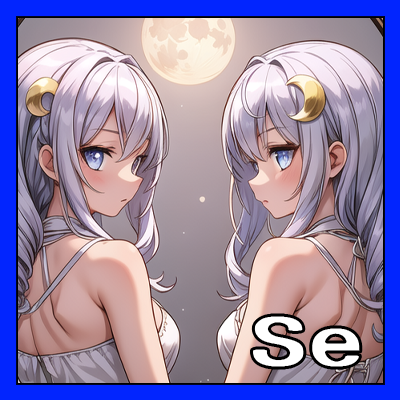
<style>
.page{position:relative;width:400px;height:400px}
.page>*{position:absolute;margin:0}
.t1{font:74.2px "YetR-HM";color:#ffffff;font-weight:bold;scale:1.33 1}
</style>
<div class="page">
<p class="t1" style="left:251px;top:315px;width:110px;height:53px">Se</p>
</div>
